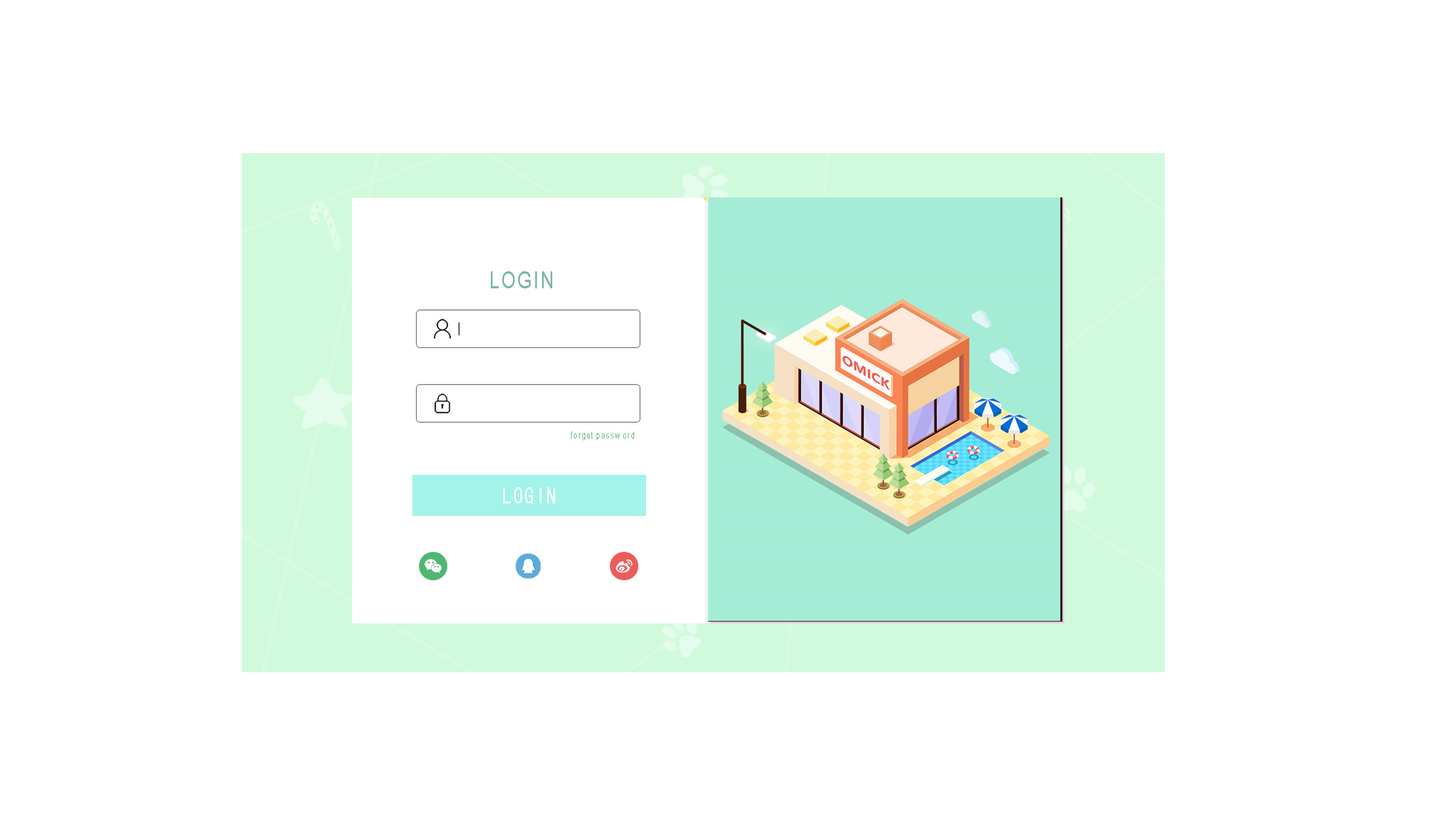
<style>
.page{position:relative;width:1456px;height:819px;background:#ffffff}
.page>*{position:absolute;margin:0}
.t1{font:23.9px "ArialMT";letter-spacing:0.061em;color:#7bb7a5;scale:0.79 1}
.t2{font:9.5px "ArialMT";letter-spacing:0.061em;color:#5cb072;scale:0.79 1}
.t3{font:23.9px "SimHei";letter-spacing:0.061em;color:#ffffff;scale:0.79 1}
</style>
<div class="page">
<p class="t1" style="left:491px;top:271px;width:61px;height:17px">LOGIN</p>
<p class="t2" style="left:570px;top:432px;width:64px;height:8px">forget password</p>
<p class="t3" style="left:503px;top:487px;width:52px;height:17px">LOGIN</p>
</div>
